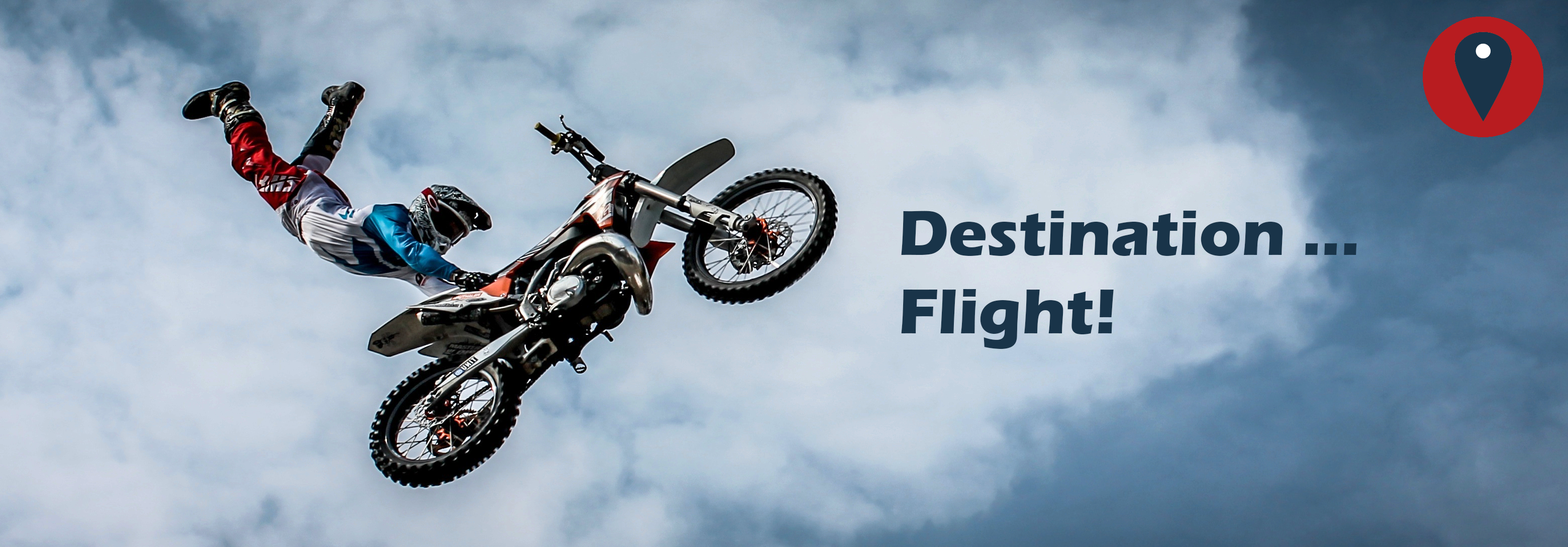
<style>
.page{position:relative;width:1568px;height:547px}
.page>*{position:absolute;margin:0}
.t1{font:65.3px "ErasITC-Bold";color:#193449}
</style>
<div class="page">
<p class="t1" style="left:901px;top:211px;width:456px;height:138px">Destination ...<br>Flight!</p>
</div>
